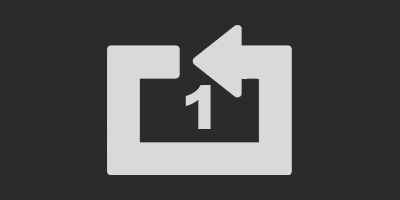
<style>
.page{position:relative;width:400px;height:200px;background:#2b2b2b}
.page>*{position:absolute;margin:0}
.t1{font:60px "Arial-Black";letter-spacing:0.075em;color:#d9d9d8}
</style>
<div class="page">
<p class="t1" style="left:185px;top:85px;width:26px;height:44px">1</p>
</div>
